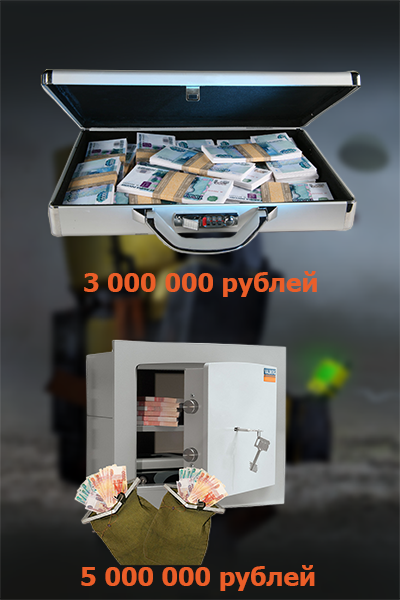
<style>
.page{position:relative;width:400px;height:600px}
.page>*{position:absolute;margin:0}
.t1{font:26px "Tahoma-Bold";color:#eb5e28}
</style>
<div class="page">
<p class="t1" style="left:84px;top:271px;width:233px;height:26px">3 000 000 рублей</p>
<p class="t1" style="left:81px;top:565px;width:234px;height:26px">5 000 000 рублей</p>
</div>
